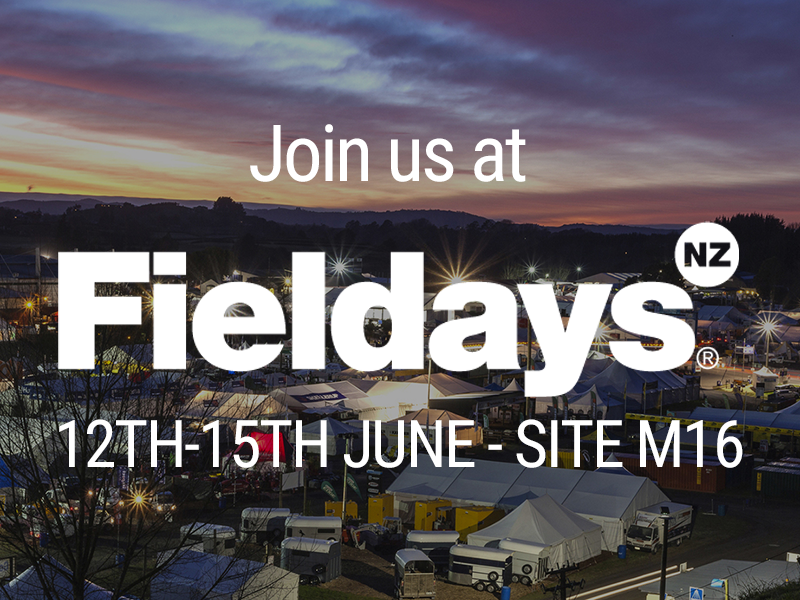
<style>
.page{position:relative;width:800px;height:600px}
.page>*{position:absolute;margin:0}
.t1{font:78.9px "RobotoCondensed-Regular";letter-spacing:-0.035em;color:#ffffff}
.t2{font:65.7px "RobotoCondensed-Regular";letter-spacing:-0.035em;color:#ffffff}
</style>
<div class="page">
<p class="t1" style="left:250px;top:124px;width:276px;height:58px">Join us at</p>
<p class="t2" style="left:59px;top:419px;width:684px;height:49px">12TH-15TH JUNE - SITE M16</p>
</div>
